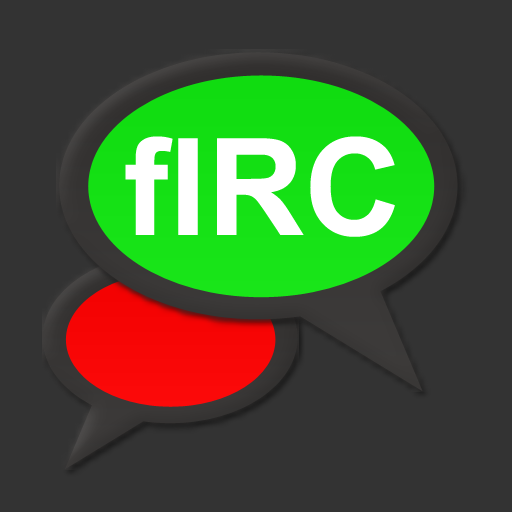
<style>
.page{position:relative;width:512px;height:512px;background:#333333}
.page>*{position:absolute;margin:0}
.t1{font:135.1px "Arial-BoldMT";color:#ffffff}
</style>
<div class="page">
<p class="t1" style="left:125px;top:136px;width:270px;height:101px">fIRC</p>
</div>
